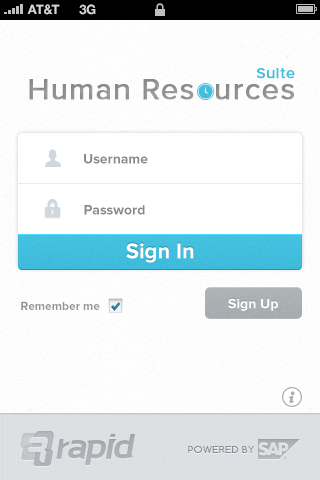
<style>
.page{position:relative;width:320px;height:480px;background:#ffffff}
.page>*{position:absolute;margin:0}
.t1{font:13px "HelveticaNeue-Bold";color:#d4d4d4;text-transform:uppercase}
.t2{font:15px "ProximaNova-Regular";letter-spacing:0.036em;color:#41bedd;font-weight:bold}
.t3{font:30px "ProximaNova-Regular";letter-spacing:0.023em;color:#919191;font-weight:bold}
.t4{font:14px "ProximaNova-Bold";color:#898989}
.t5{font:22px "ProximaNova-Bold";color:#ffffff}
.t6{font:12px "ProximaNova-Bold";color:#919699}
.t7{font:14px "ProximaNova-Bold";color:#ffffff}
.t8{font:9px "Comfortaa";letter-spacing:0.036em;color:#898c96;text-transform:uppercase;scale:1.11 1}
</style>
<div class="page">
<p class="t1" style="left:27px;top:4px;width:33px;height:11px">AT&amp;t</p>
<p class="t1" style="left:79px;top:4px;width:17px;height:11px">3G</p>
<p class="t2" style="left:256px;top:68px;width:39px;height:11px">Suite</p>
<p class="t3" style="left:29px;top:79px;width:265px;height:21px">Human Res  urces</p>
<p class="t4" style="left:84px;top:154px;width:64px;height:10px">Username</p>
<p class="t4" style="left:84px;top:205px;width:61px;height:10px">Password</p>
<p class="t5" style="left:126px;top:243px;width:68px;height:20px">Sign In</p>
<p class="t6" style="left:21px;top:301px;width:79px;height:9px">Remember me</p>
<p class="t7" style="left:228px;top:298px;width:50px;height:13px">Sign Up</p>
<p class="t8" style="left:188px;top:446px;width:66px;height:7px">POWERED BY</p>
</div>
